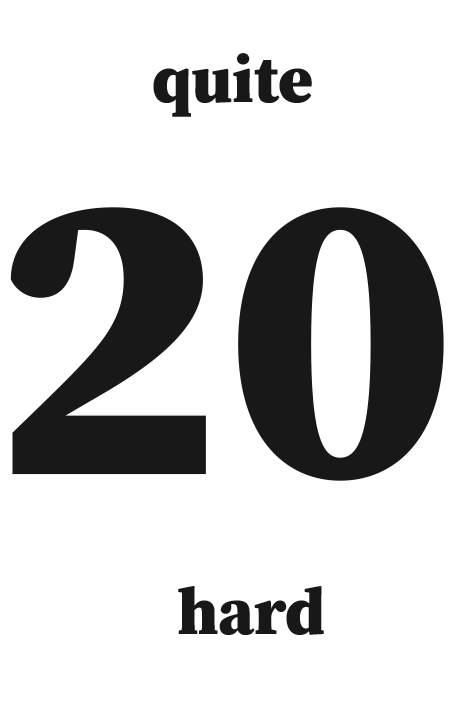
<style>
.page{position:relative;width:464px;height:716px;background:#ffffff}
.page>*{position:absolute;margin:0}
.t1{font:66.7px "SourceSerifRoman-Black";color:#181818}
.t2{font:416.7px "SourceSerifRoman-Black";color:#181818}
</style>
<div class="page">
<p class="t1" style="left:153px;top:53px;width:159px;height:64px">quite</p>
<p class="t2" style="left:10px;top:207px;width:434px;height:274px">20</p>
<p class="t1" style="left:178px;top:586px;width:146px;height:49px">hard</p>
</div>
